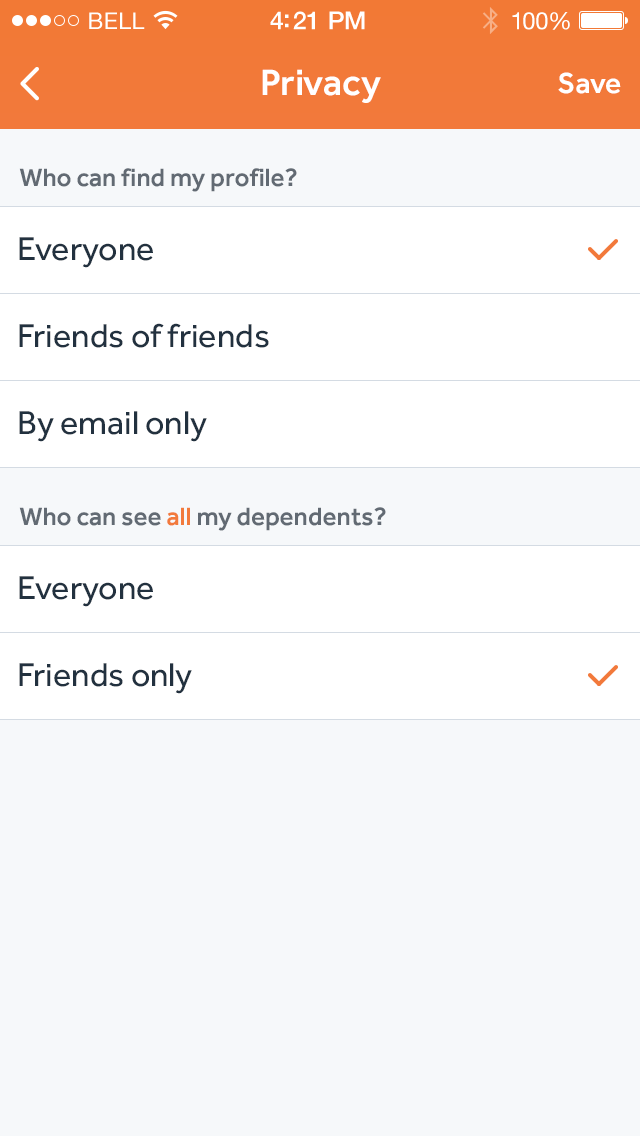
<style>
.page{position:relative;width:640px;height:1136px;background:#f6f8fa}
.page>*{position:absolute;margin:0}
.t1{font:23px "HelveticaNeue";letter-spacing:0.02em;color:#ffffff}
.t2{font:25px "HelveticaNeue-Medium";letter-spacing:-0.02em;color:#ffffff}
.t3{font:24px "HelveticaNeue";letter-spacing:-0.02em;color:#ffffff}
.t4{font:38px "Effra-Medium";color:#ffffff}
.t5{font:30px "Effra-Medium";color:#ffffff}
.t6{font:26px "Effra-Medium";color:#626a73}
.t7{font:34px "Effra-Regular";color:#22313f}
.t8{font:26px "Effra-Medium";color:#f2793c}
</style>
<div class="page">
<p class="t1" style="left:89px;top:12px;width:56px;height:17px">BELL</p>
<p class="t2" style="left:270px;top:11px;width:95px;height:19px">4:21 PM</p>
<p class="t3" style="left:512px;top:12px;width:58px;height:18px">100%</p>
<p class="t4" style="left:262px;top:69px;width:119px;height:34px">Privacy</p>
<p class="t5" style="left:558px;top:72px;width:63px;height:22px">Save</p>
<p class="t6" style="left:19px;top:168px;width:278px;height:24px">Who can find my profile?</p>
<p class="t7" style="left:19px;top:237px;width:134px;height:31px">Everyone</p>
<p class="t7" style="left:19px;top:323px;width:250px;height:25px">Friends of friends</p>
<p class="t7" style="left:19px;top:411px;width:188px;height:31px">By email only</p>
<p class="t6" style="left:19px;top:507px;width:367px;height:24px">Who can see <span class="t8">all</span> my dependents?</p>
<p class="t7" style="left:19px;top:576px;width:134px;height:31px">Everyone</p>
<p class="t7" style="left:19px;top:663px;width:173px;height:31px">Friends only</p>
</div>
